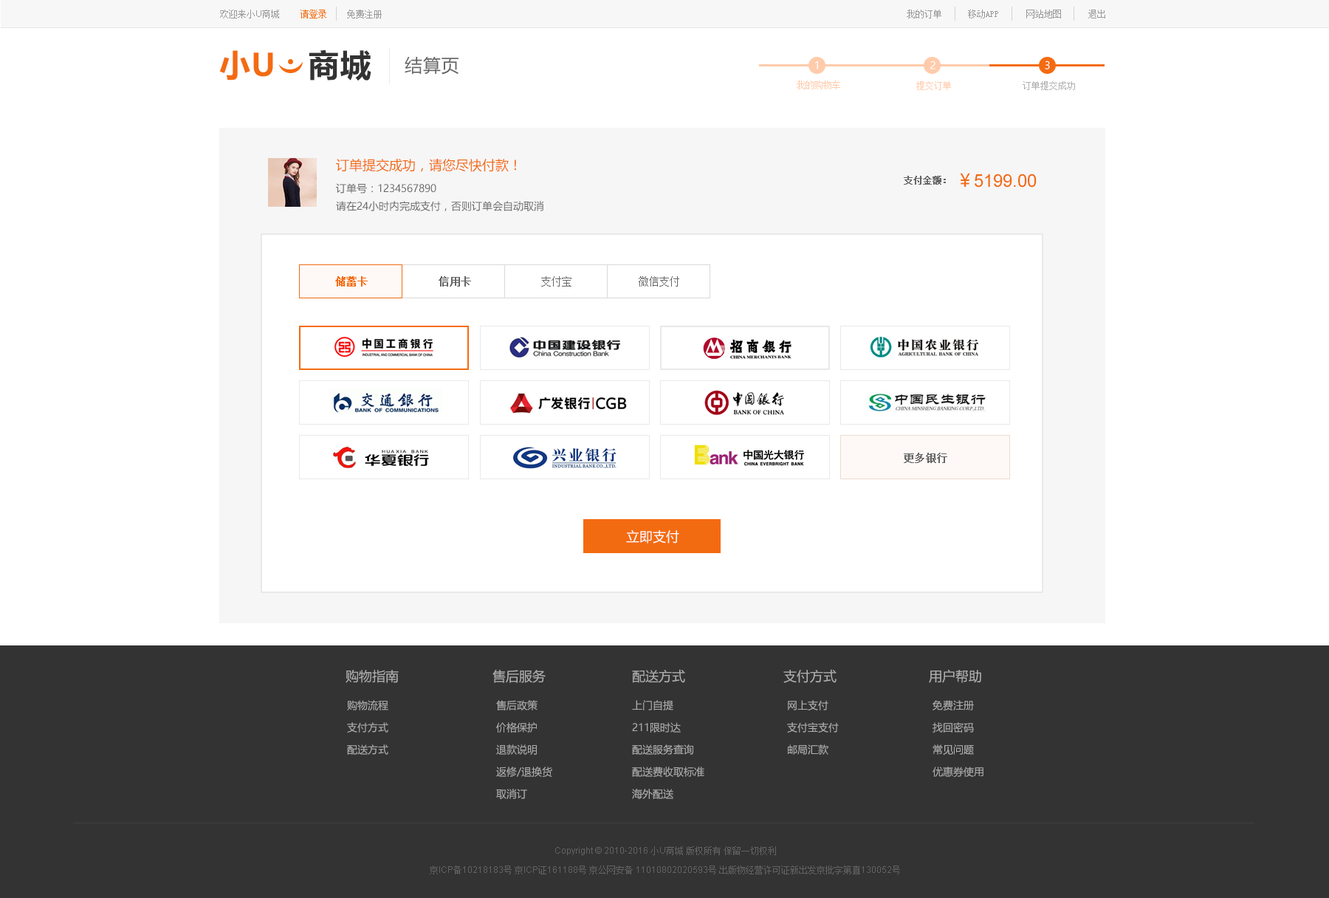
<style>
.page{position:relative;width:1329px;height:898px;background:#ffffff}
.page>*{position:absolute;margin:0}
.t1{font:8.9px "SimSun";color:#999999}
.t2{font:8.9px "ArialMT";color:#999999}
.t3{font:8.9px "SimSun";color:#f36b11}
.t4{font:31px "MicrosoftYaHei-Bold";letter-spacing:0.03em;color:#f36b11}
.t5{font:31px "MicrosoftYaHei-Bold";letter-spacing:0.03em;color:#333333}
.t6{font:17.7px "MicrosoftYaHei";letter-spacing:0.03em;color:#666666}
.t7{font:10.3px "MicrosoftYaHei";color:#ffffff}
.t8{font:8.9px "SimSun";color:#ffcbab}
.t9{font:8.9px "SimSun";color:#afafaf}
.t10{font:10.3px/17.7px "MicrosoftYaHei";color:#666666}
.t11{font:13.3px/35.4px "MicrosoftYaHei";color:#f36b11}
.t12{font:10.3px/22.1px "MicrosoftYaHei";color:#666666}
.t13{font:17.7px "ArialMT";color:#f36b11}
.t14{font:17.7px "MicrosoftYaHei";color:#f36b11}
.t15{font:8.9px "SimSun";color:#666666;font-weight:bold}
.t16{font:10.3px "SimSun";color:#f36b11;font-weight:bold}
.t17{font:10.3px "SimSun";color:#666666;font-weight:bold}
.t18{font:10.3px "SimSun";color:#666666}
.t19{font:13.3px "MicrosoftYaHei";color:#ffffff}
.t20{font:13.3px "MicrosoftYaHei";color:#afafaf}
.t21{font:10.3px/22.1px "MicrosoftYaHei";color:#afafaf}
.t22{font:8.9px/19.2px "ArialMT";color:#636363}
.t23{font:8.9px/19.2px "SimSun";color:#636363}
</style>
<div class="page">
<p class="t1" style="left:220px;top:10px;width:59px;height:8px">欢迎来小<span class="t2">U</span>商城</p>
<p class="t3" style="left:300px;top:10px;width:26px;height:8px">请登录</p>
<p class="t1" style="left:347px;top:10px;width:35px;height:8px">免费注册</p>
<p class="t1" style="left:906px;top:10px;width:35px;height:8px">我的订单</p>
<p class="t1" style="left:968px;top:10px;width:30px;height:8px">移动APP</p>
<p class="t1" style="left:1026px;top:10px;width:35px;height:8px">网站地图</p>
<p class="t1" style="left:1088px;top:10px;width:17px;height:8px">退出</p>
<p class="t4" style="left:219px;top:50px;width:152px;height:31px">小U   <span class="t5">商城</span></p>
<p class="t6" style="left:404px;top:56px;width:54px;height:19px">结算页</p>
<p class="t7" style="left:815px;top:61px;width:3px;height:8px">1</p>
<p class="t7" style="left:930px;top:61px;width:5px;height:8px">2</p>
<p class="t7" style="left:1044px;top:61px;width:6px;height:8px">3</p>
<p class="t8" style="left:796px;top:80px;width:44px;height:9px">我的购物车</p>
<p class="t8" style="left:916px;top:81px;width:35px;height:9px">提交订单</p>
<p class="t9" style="left:1022px;top:81px;width:53px;height:9px">订单提交成功</p>
<p class="t10" style="left:336px;top:159px;width:208px;height:52px"><span class="t11">订单提交成功，请您尽快付款！<br></span><span class="t12">订单号：1234567890<br></span>请在24小时内完成支付，否则订单会自动取消</p>
<p class="t13" style="left:960px;top:173px;width:76px;height:14px"><span class="t14">￥</span>5199.00</p>
<p class="t15" style="left:903px;top:176px;width:43px;height:9px">支付金额：</p>
<p class="t16" style="left:335px;top:276px;width:33px;height:10px">储蓄卡</p>
<p class="t17" style="left:438px;top:276px;width:33px;height:10px">信用卡</p>
<p class="t18" style="left:541px;top:276px;width:30px;height:10px">支付宝</p>
<p class="t18" style="left:638px;top:276px;width:41px;height:10px">微信支付</p>
<p class="t17" style="left:903px;top:452px;width:44px;height:11px">更多银行</p>
<p class="t19" style="left:626px;top:529px;width:53px;height:14px">立即支付</p>
<p class="t20" style="left:345px;top:669px;width:54px;height:14px">购物指南</p>
<p class="t20" style="left:492px;top:669px;width:53px;height:14px">售后服务</p>
<p class="t20" style="left:632px;top:669px;width:53px;height:14px">配送方式</p>
<p class="t20" style="left:783px;top:669px;width:53px;height:14px">支付方式</p>
<p class="t20" style="left:929px;top:669px;width:52px;height:14px">用户帮助</p>
<p class="t21" style="left:347px;top:700px;width:41px;height:54px">购物流程<br>支付方式<br>配送方式</p>
<p class="t21" style="left:496px;top:700px;width:56px;height:99px">售后政策<br>价格保护<br>退款说明<br>返修/退换货<br>取消订</p>
<p class="t21" style="left:632px;top:700px;width:72px;height:99px">上门自提<br>211限时达<br>配送服务查询<br>配送费收取标准<br>海外配送</p>
<p class="t21" style="left:787px;top:700px;width:51px;height:54px">网上支付<br>支付宝支付<br>邮局汇款</p>
<p class="t21" style="left:932px;top:700px;width:51px;height:77px">免费注册<br>找回密码<br>常见问题<br>优惠券使用</p>
<p class="t22" style="left:430px;top:846px;width:470px;height:28px;text-align:center">Copyright © 2010-2016 <span class="t23">小</span>U<span class="t23">商城 版权所有 保留一切权利<br>京</span>ICP<span class="t23">备</span>10218183<span class="t23">号 京</span>ICP<span class="t23">证</span>161188<span class="t23">号 京公网安备</span> 11010802020593<span class="t23">号 出版物经营许可证新出发京批字第直</span>130052<span class="t23">号</span></p>
</div>
